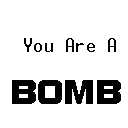
<style>
.page{position:relative;width:128px;height:128px;background:#ffffff}
.page>*{position:absolute;margin:0}
.t1{font:20px "Terminal";letter-spacing:0.025em;color:#000000}
.t2{font:36.8px "BolsterBold";letter-spacing:0.025em;color:#000000}
</style>
<div class="page">
<p class="t1" style="left:24px;top:38px;width:92px;height:14px">You Are A</p>
<p class="t2" style="left:12px;top:80px;width:109px;height:24px">BOMB</p>
</div>
